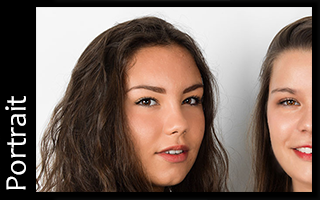
<style>
.page{position:relative;width:320px;height:200px}
.page>*{position:absolute;margin:0}
.t1{font:30px "Candara";color:#ffffff}
</style>
<div class="page">
<p class="t1" style="left:5px;top:96px;width:21px;height:94px;rotate:-90deg">Portrait</p>
</div>
